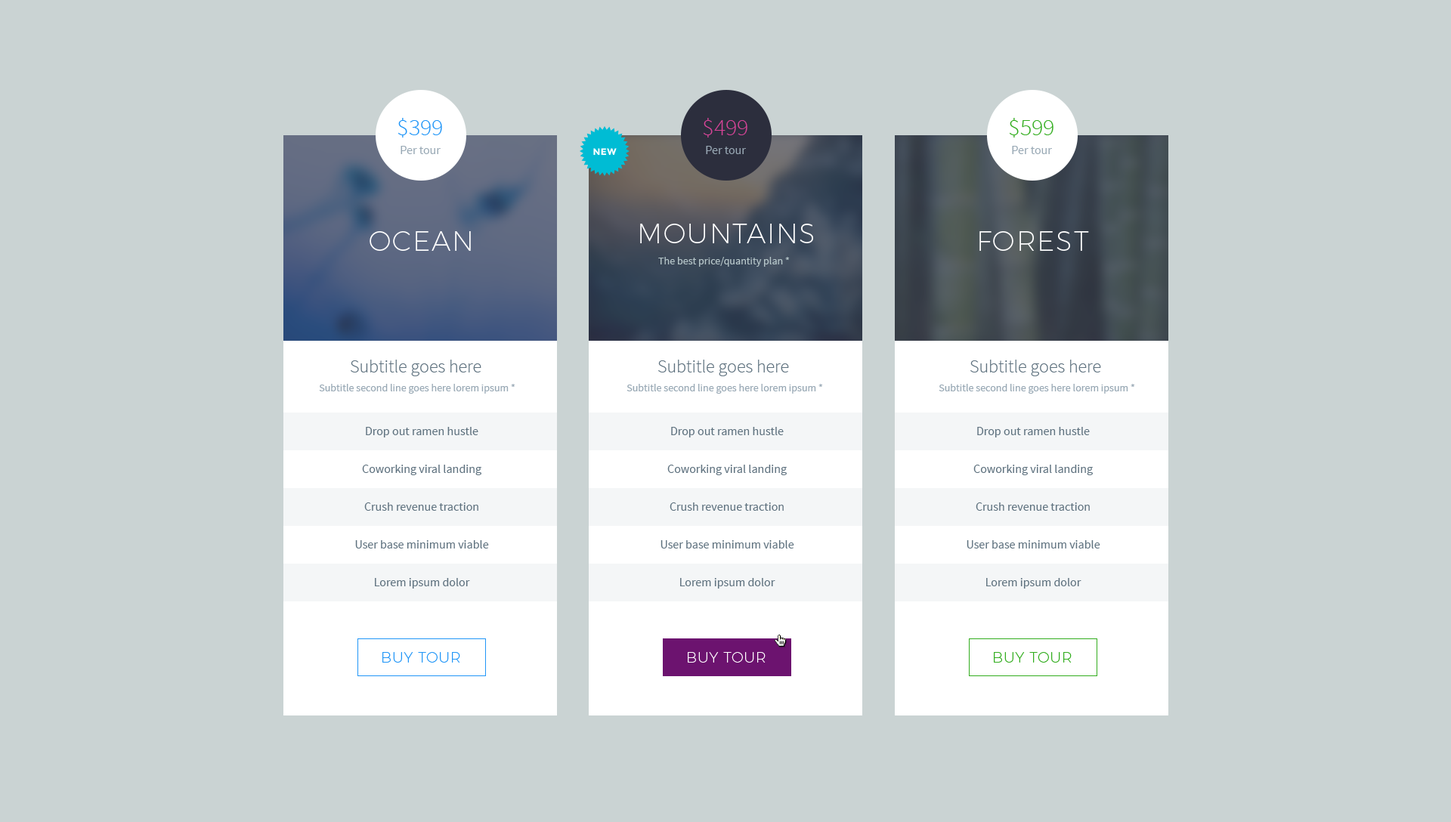
<style>
.page{position:relative;width:1451px;height:822px;background:#cad3d3}
.page>*{position:absolute;margin:0}
.t1{font:24.2px "SourceSansPro-Light";color:#2196f7}
.t2{font:24.2px "SourceSansPro-Light";color:#d74498}
.t3{font:24.2px "SourceSansPro-Light";color:#32ad1e}
.t4{font:12.1px "SourceSansPro-Regular";color:#99a9b5}
.t5{font:9.1px "Montserrat-Bold";letter-spacing:0.05em;color:#ffffff;text-transform:uppercase}
.t6{font:27.2px "Montserrat-UltraLight";letter-spacing:0.05em;color:#ffffff;text-transform:uppercase}
.t7{font:10.6px "SourceSansPro-Regular";color:#b6c6c9}
.t8{font:18.1px "SourceSansPro-Light";color:#5f727f}
.t9{font:10.6px "SourceSansPro-Regular";color:#99a9b5}
.t10{font:12.1px/37.8px "SourceSansPro-Regular";color:#5f727f}
.t11{font:14.4px "Montserrat-UltraLight";letter-spacing:0.05em;color:#2196f7;text-transform:uppercase}
.t12{font:14.4px "Montserrat-UltraLight";letter-spacing:0.05em;color:#ffffff;text-transform:uppercase}
.t13{font:14.4px "Montserrat-UltraLight";letter-spacing:0.05em;color:#32ad1e;text-transform:uppercase}
</style>
<div class="page">
<p class="t1" style="left:397px;top:118px;width:45px;height:20px">$399</p>
<p class="t2" style="left:703px;top:118px;width:44px;height:20px">$499</p>
<p class="t3" style="left:1009px;top:118px;width:44px;height:20px">$599</p>
<p class="t4" style="left:400px;top:146px;width:40px;height:8px">Per tour</p>
<p class="t5" style="left:593px;top:148px;width:24px;height:8px">new</p>
<p class="t4" style="left:706px;top:146px;width:40px;height:8px">Per tour</p>
<p class="t4" style="left:1012px;top:146px;width:40px;height:8px">Per tour</p>
<p class="t6" style="left:369px;top:231px;width:102px;height:20px">ocean</p>
<p class="t6" style="left:640px;top:224px;width:173px;height:19px">mountains</p>
<p class="t6" style="left:979px;top:231px;width:110px;height:20px">forest</p>
<p class="t7" style="left:658px;top:257px;width:132px;height:10px">The best price/quantity plan *</p>
<p class="t8" style="left:351px;top:360px;width:130px;height:16px">Subtitle goes here</p>
<p class="t8" style="left:658px;top:360px;width:131px;height:16px">Subtitle goes here</p>
<p class="t8" style="left:970px;top:360px;width:131px;height:16px">Subtitle goes here</p>
<p class="t9" style="left:319px;top:384px;width:196px;height:10px">Subtitle second line goes here lorem ipsum *</p>
<p class="t9" style="left:626px;top:384px;width:197px;height:10px">Subtitle second line goes here lorem ipsum *</p>
<p class="t9" style="left:938px;top:384px;width:197px;height:10px">Subtitle second line goes here lorem ipsum *</p>
<p class="t10" style="left:355px;top:427px;width:134px;height:162px;text-align:center">Drop out ramen hustle<br>Coworking viral landing<br>Crush revenue traction<br>User base minimum viable<br>Lorem ipsum dolor</p>
<p class="t10" style="left:660px;top:427px;width:134px;height:162px;text-align:center">Drop out ramen hustle<br>Coworking viral landing<br>Crush revenue traction<br>User base minimum viable<br>Lorem ipsum dolor</p>
<p class="t10" style="left:966px;top:427px;width:134px;height:162px;text-align:center">Drop out ramen hustle<br>Coworking viral landing<br>Crush revenue traction<br>User base minimum viable<br>Lorem ipsum dolor</p>
<p class="t11" style="left:382px;top:652px;width:78px;height:11px">buy tour</p>
<p class="t12" style="left:688px;top:652px;width:77px;height:11px">buy tour</p>
<p class="t13" style="left:994px;top:652px;width:77px;height:11px">buy tour</p>
</div>
